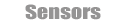
<style>
.page{position:relative;width:128px;height:24px;background:#ffffff}
.page>*{position:absolute;margin:0}
.t1{font:18px "Impact";color:#959494;scale:1.25 1}
</style>
<div class="page">
<p class="t1" style="left:25px;top:4px;width:76px;height:16px">Sensors</p>
</div>
